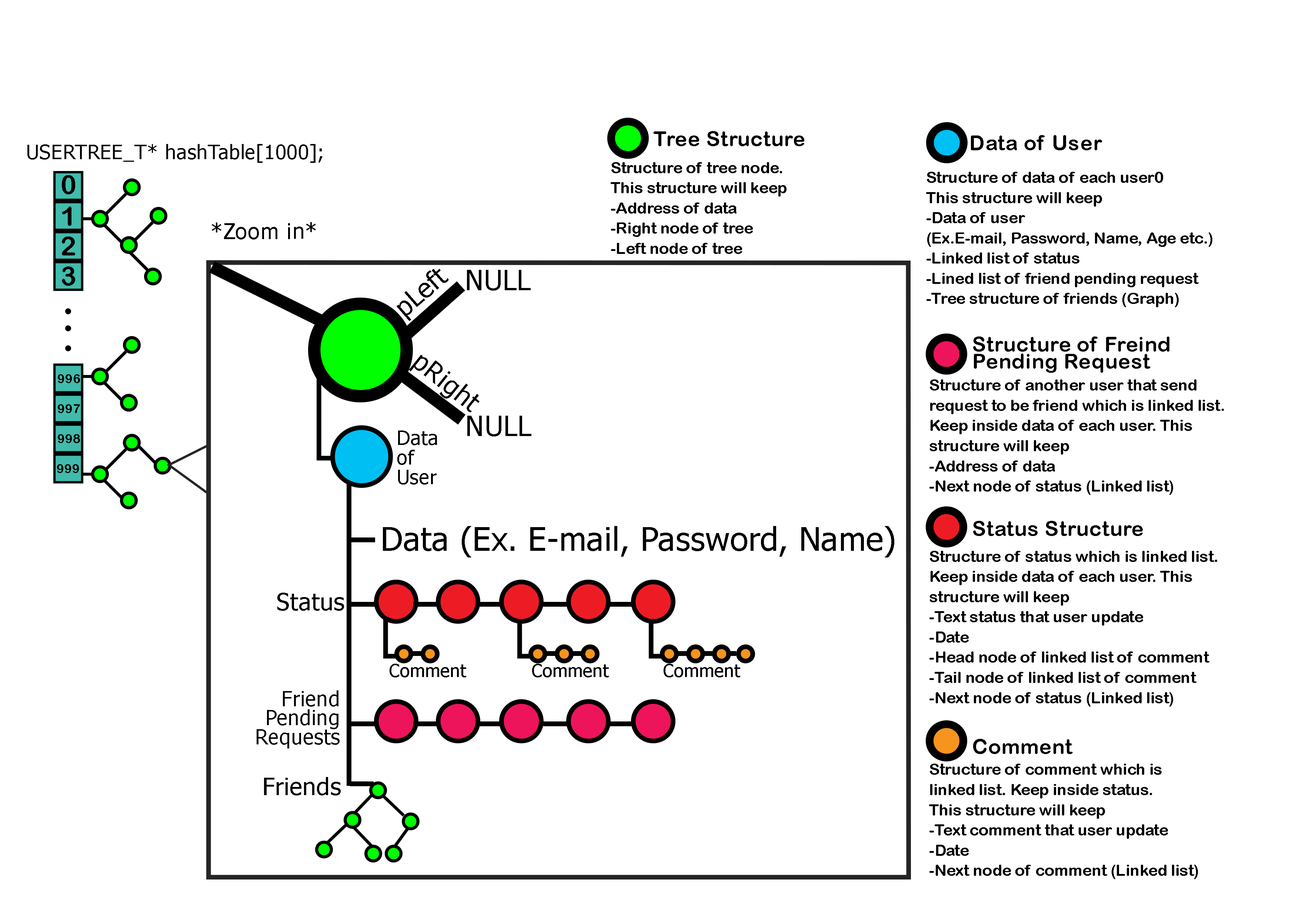
<style>
.page{position:relative;width:1299px;height:918px;background:#ffffff}
.page>*{position:absolute;margin:0}
.t1{font:20.8px "ArialRoundedMTBold";letter-spacing:0.015em;color:#000000}
.t2{font:20.1px "Tahoma";letter-spacing:0.015em;color:#000000}
.t3{font:15.7px/20.2px "ArialRoundedMTBold";color:#000000}
.t4{font:26.2px "ArialRoundedMTBold";letter-spacing:0.015em;color:#000000}
.t5{font:22px "Tahoma";letter-spacing:0.015em;color:#000000}
.t6{font:25.9px "Tahoma";letter-spacing:0.015em;color:#000000}
.t7{font:28.1px "Tahoma";letter-spacing:0.015em;color:#000000}
.t8{font:20.8px/17.3px "ArialRoundedMTBold";letter-spacing:0.015em;color:#000000}
.t9{font:12.7px "ArialRoundedMTBold";letter-spacing:0.015em;color:#000000}
.t10{font:19.7px/19.7px "Tahoma";letter-spacing:0.015em;color:#000000}
.t11{font:32.4px "Tahoma";letter-spacing:0.015em;color:#000000}
.t12{font:24px "Tahoma";letter-spacing:0.015em;color:#000000}
.t13{font:17.9px "Tahoma";letter-spacing:0.015em;color:#000000}
.t14{font:20.7px/19px "Tahoma";letter-spacing:0.015em;color:#000000}
</style>
<div class="page">
<p class="t1" style="left:653px;top:131px;width:151px;height:15px">Tree Structure</p>
<p class="t1" style="left:971px;top:135px;width:131px;height:15px">Data of User</p>
<p class="t2" style="left:27px;top:144px;width:295px;height:19px">USERTREE_T* hashTable[1000];</p>
<p class="t3" style="left:610px;top:162px;width:176px;height:92px">Structure of tree node.<br>This structure will keep<br>-Address of data<br>-Right node of tree<br>-Left node of tree</p>
<p class="t3" style="left:926px;top:172px;width:286px;height:135px">Structure of data of each user0<br>This structure will keep<br>-Data of user<br>(Ex.E-mail, Password, Name, Age etc.)<br>-Linked list of status<br>-Lined list of friend pending request<br>-Tree structure of friends (Graph)</p>
<p class="t4" style="left:62px;top:175px;width:13px;height:19px">0</p>
<p class="t4" style="left:62px;top:207px;width:9px;height:19px">1</p>
<p class="t5" style="left:212px;top:222px;width:104px;height:18px">*Zoom in*</p>
<p class="t4" style="left:62px;top:237px;width:13px;height:18px">2</p>
<p class="t4" style="left:62px;top:267px;width:13px;height:19px">3</p>
<p class="t6" style="left:397px;top:269px;width:52px;height:52px;rotate:-41deg">pLeft</p>
<p class="t7" style="left:467px;top:270px;width:64px;height:21px">NULL</p>
<p class="t8" style="left:973px;top:337px;width:196px;height:36px">Structure of Freind<br>Pending Request</p>
<p class="t6" style="left:409px;top:355px;width:70px;height:57px;rotate:39deg">pRight</p>
<p class="t9" style="left:58px;top:374px;width:22px;height:9px">996</p>
<p class="t3" style="left:929px;top:379px;width:295px;height:116px">Structure of another user that send<br>request to be friend which is linked list.<br>Keep inside data of each user. This<br>structure will keep<br>-Address of data<br>-Next node of status (Linked list)</p>
<p class="t9" style="left:58px;top:404px;width:22px;height:9px">997</p>
<p class="t7" style="left:467px;top:416px;width:64px;height:20px">NULL</p>
<p class="t9" style="left:58px;top:434px;width:22px;height:9px">998</p>
<p class="t10" style="left:397px;top:431px;width:40px;height:54px">Data<br>of<br>User</p>
<p class="t9" style="left:57px;top:464px;width:22px;height:9px">999</p>
<p class="t1" style="left:973px;top:521px;width:170px;height:15px">Status Structure</p>
<p class="t11" style="left:383px;top:526px;width:511px;height:32px">Data (Ex. E-mail, Password, Name)</p>
<p class="t3" style="left:929px;top:551px;width:288px;height:156px">Structure of status which is linked list.<br>Keep inside data of each user. This<br>structure will keep<br>-Text status that user update<br>-Date<br>-Head node of linked list of comment<br>-Tail node of linked list of comment<br>-Next node of status (Linked list)</p>
<p class="t12" style="left:277px;top:593px;width:67px;height:18px">Status</p>
<p class="t13" style="left:389px;top:664px;width:77px;height:14px">Comment</p>
<p class="t13" style="left:532px;top:664px;width:77px;height:14px">Comment</p>
<p class="t13" style="left:663px;top:664px;width:77px;height:14px">Comment</p>
<p class="t14" style="left:257px;top:690px;width:82px;height:59px;text-align:right">Friend<br>Pending<br>Requests</p>
<p class="t1" style="left:973px;top:739px;width:100px;height:15px">Comment</p>
<p class="t3" style="left:929px;top:764px;width:269px;height:115px">Structure of comment which is<br>linked list. Keep inside status.<br>This structure will keep<br>-Text comment that user update<br>-Date<br>-Next node of comment (Linked list)</p>
<p class="t12" style="left:264px;top:777px;width:77px;height:19px">Friends</p>
</div>
